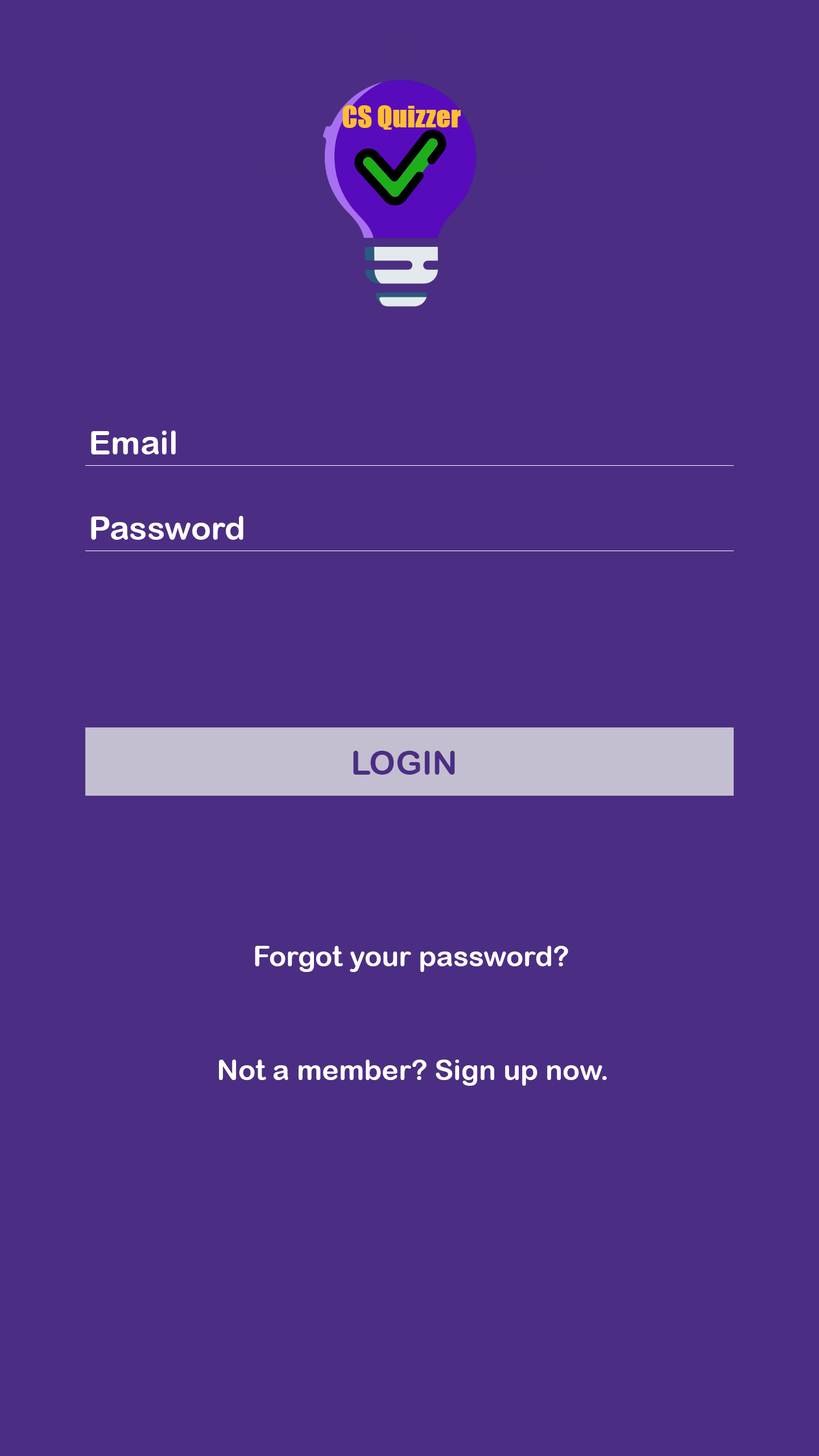
<style>
.page{position:relative;width:819px;height:1456px;background:#4b2e83}
.page>*{position:absolute;margin:0}
.t1{font:33.2px "ArialRoundedMTBold";color:#ffffff}
.t2{font:33.2px "ArialRoundedMTBold";color:#4b2e83}
.t3{font:28.4px "ArialRoundedMTBold";color:#ffffff}
</style>
<div class="page">
<p class="t1" style="left:91px;top:431px;width:85px;height:23px">Email</p>
<p class="t1" style="left:91px;top:516px;width:152px;height:24px">Password</p>
<p class="t2" style="left:353px;top:751px;width:102px;height:24px">LOGIN</p>
<p class="t3" style="left:255px;top:946px;width:313px;height:26px">Forgot your password?</p>
<p class="t3" style="left:219px;top:1060px;width:388px;height:26px">Not a member? Sign up now.</p>
</div>
